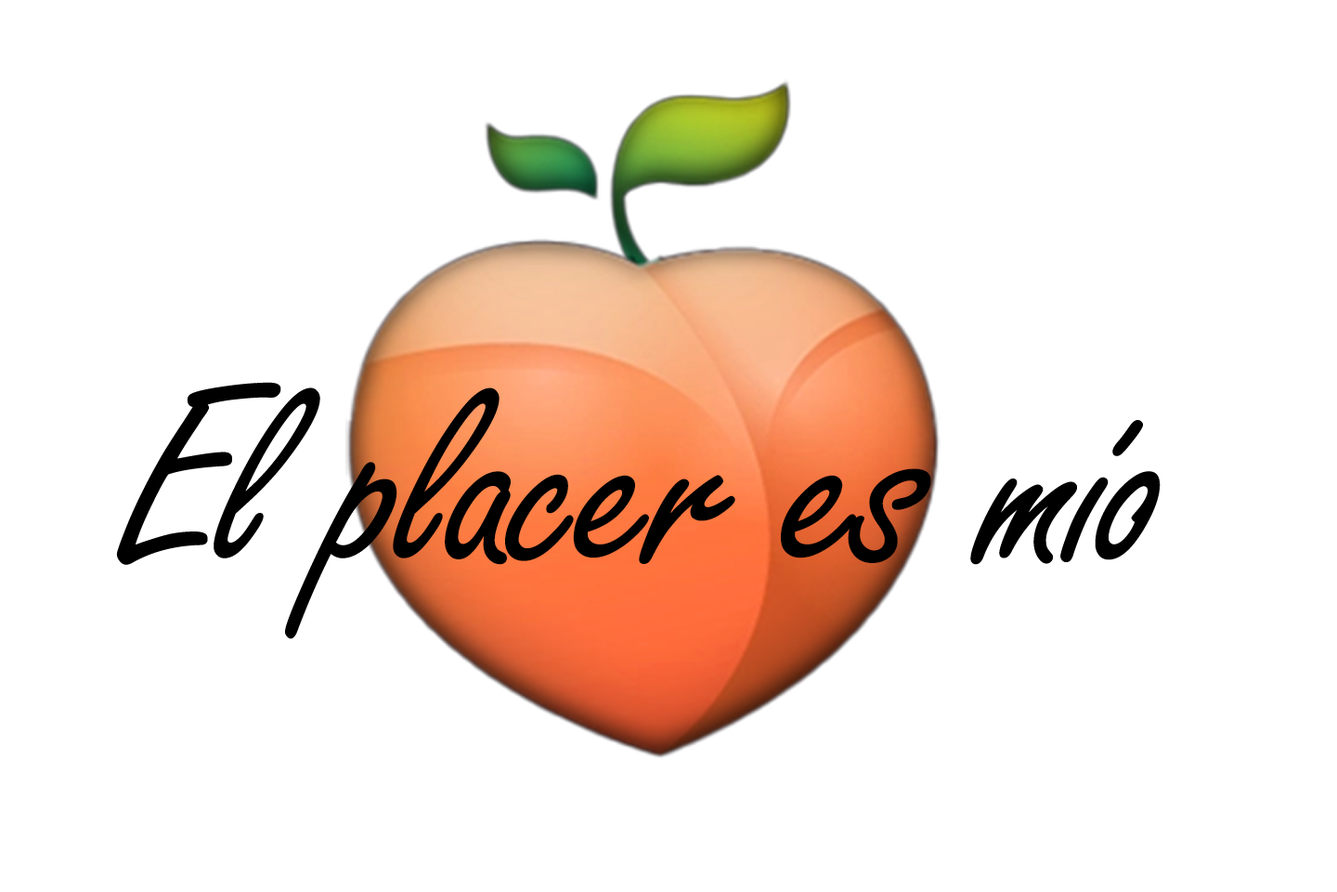
<style>
.page{position:relative;width:1337px;height:892px;background:#ffffff}
.page>*{position:absolute;margin:0}
.t1{font:274.4px "FreestyleScript-Regular";letter-spacing:-0.025em;color:#000000}
</style>
<div class="page">
<p class="t1" style="left:116px;top:382px;width:1045px;height:257px">El placer es mío</p>
</div>
